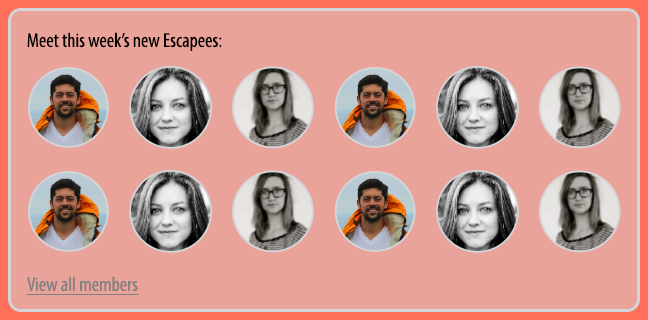
<style>
.page{position:relative;width:648px;height:320px;background:#e9a39a}
.page>*{position:absolute;margin:0}
.t1{font:20.2px "MyriadPro-Cond";color:#000000}
.t2{font:20.2px "MyriadPro-Cond";color:#808080;text-decoration:underline}
</style>
<div class="page">
<p class="t1" style="left:27px;top:32px;width:195px;height:19px">Meet this week’s new Escapees:</p>
<p class="t2" style="left:26px;top:276px;width:113px;height:19px">View all members</p>
</div>
